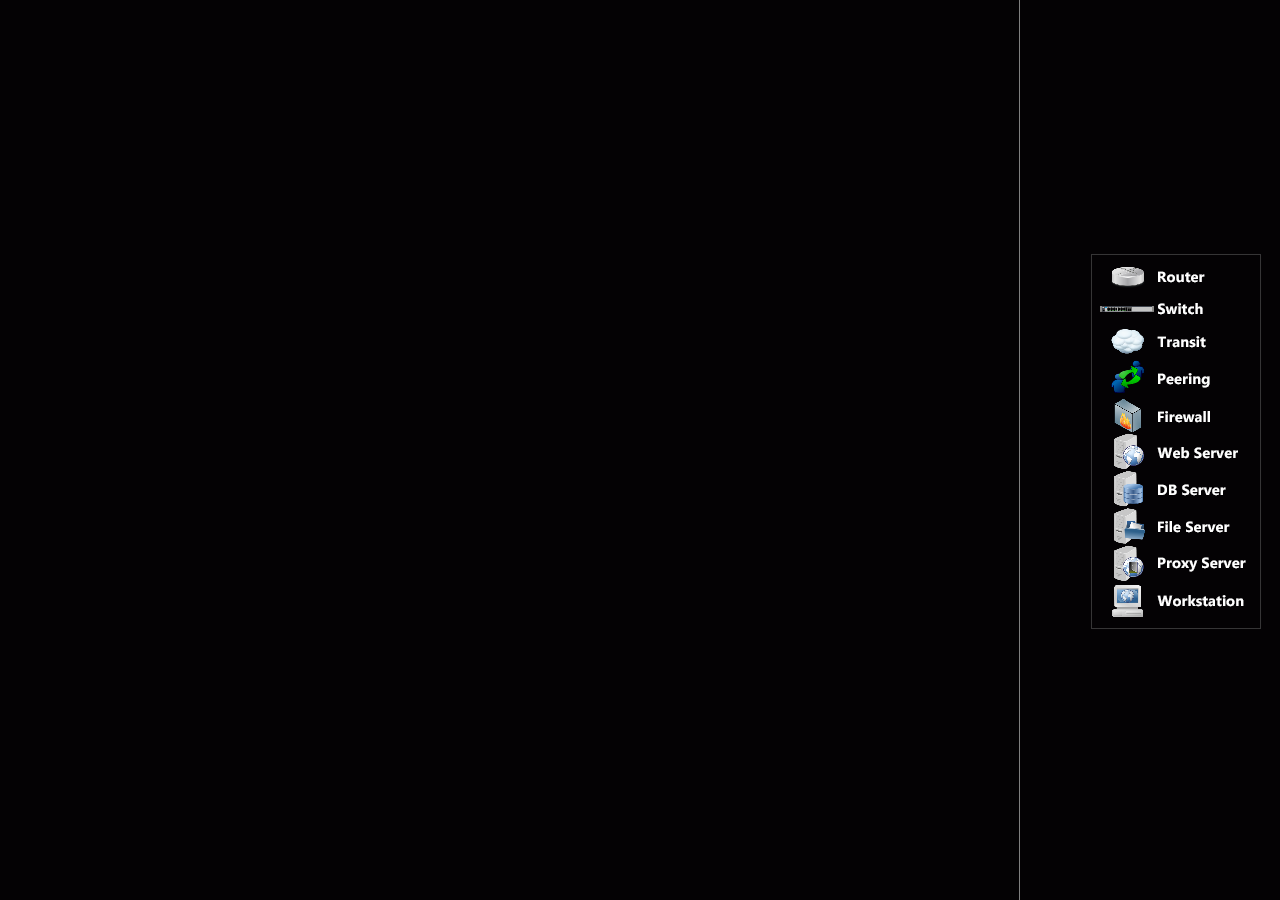
<style>
.page{position:relative;width:1280px;height:900px;background:#040204}
.page>*{position:absolute;margin:0}
.t1{font:14.8px "Ebrima-Bold";color:#ffffff}
</style>
<div class="page">
<p class="t1" style="left:1158px;top:271px;width:47px;height:12px">Router</p>
<p class="t1" style="left:1158px;top:303px;width:45px;height:12px">Switch</p>
<p class="t1" style="left:1157px;top:336px;width:49px;height:12px">Transit</p>
<p class="t1" style="left:1158px;top:373px;width:52px;height:15px">Peering</p>
<p class="t1" style="left:1158px;top:411px;width:52px;height:12px">Firewall</p>
<p class="t1" style="left:1157px;top:447px;width:81px;height:12px">Web Server</p>
<p class="t1" style="left:1158px;top:484px;width:68px;height:12px">DB Server</p>
<p class="t1" style="left:1158px;top:521px;width:72px;height:12px">File Server</p>
<p class="t1" style="left:1158px;top:557px;width:88px;height:15px">Proxy Server</p>
<p class="t1" style="left:1157px;top:595px;width:87px;height:12px">Workstation</p>
</div>
